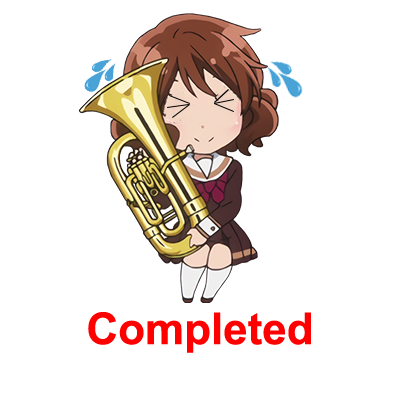
<style>
.page{position:relative;width:400px;height:400px;background:#ffffff}
.page>*{position:absolute;margin:0}
.t1{font:44px "Arial-BoldMT";color:#ff0000}
</style>
<div class="page">
<p class="t1" style="left:88px;top:312px;width:223px;height:41px">Completed</p>
</div>
